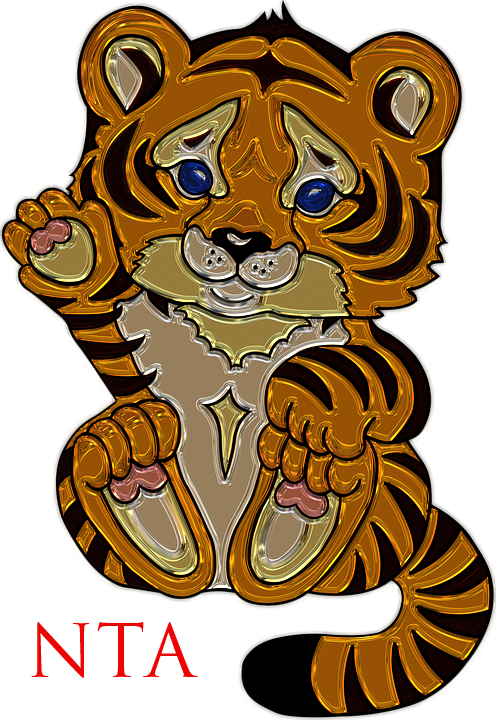
<style>
.page{position:relative;width:496px;height:720px;background:#ffffff}
.page>*{position:absolute;margin:0}
.t1{font:72px "TrajanPro-Regular";color:#ed0404}
</style>
<div class="page">
<p class="t1" style="left:31px;top:622px;width:167px;height:56px">NTA</p>
</div>
